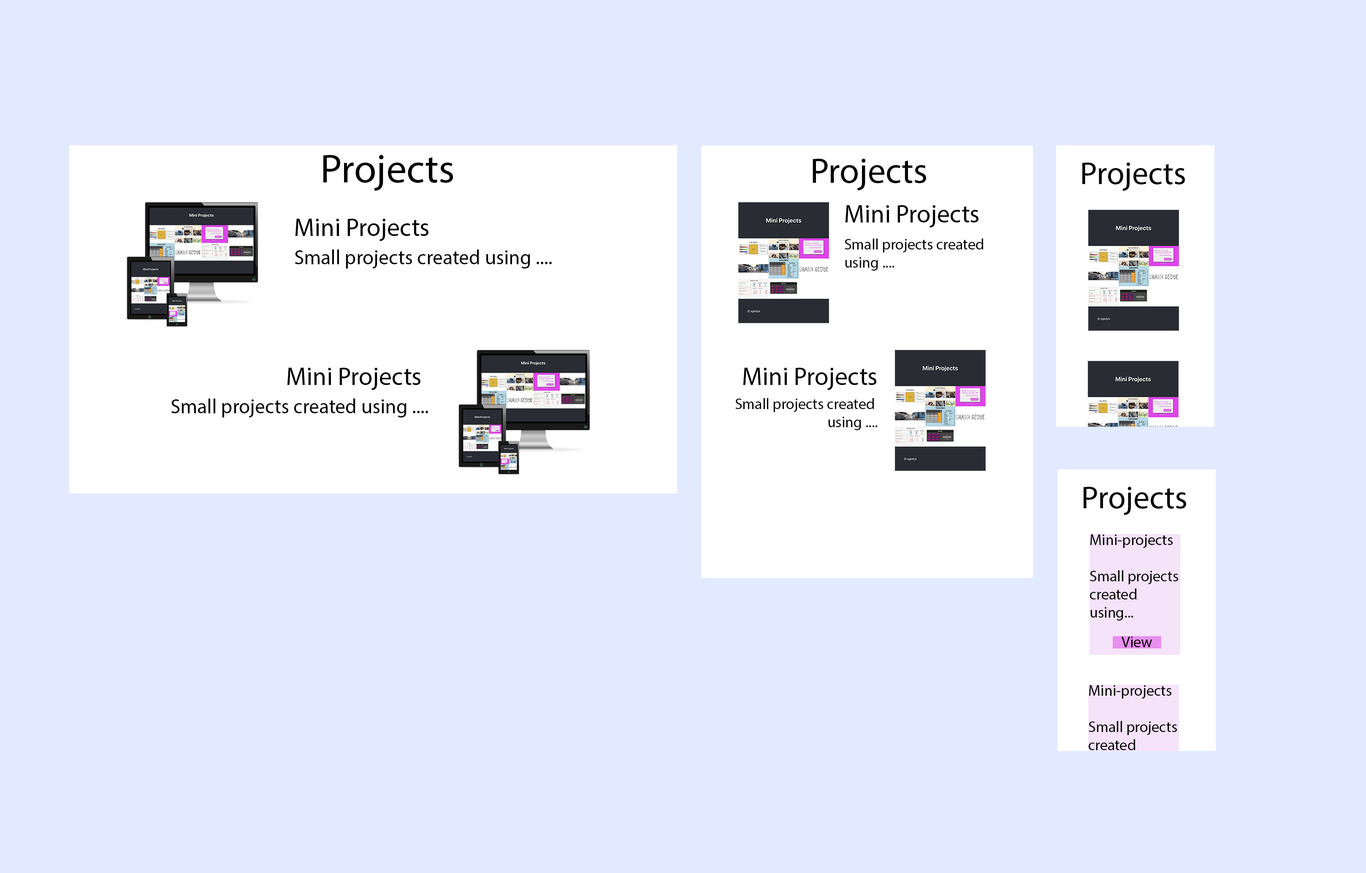
<style>
.page{position:relative;width:1366px;height:873px;background:#e2eaff}
.page>*{position:absolute;margin:0}
.t1{font:40.5px "MyriadPro-Regular";color:#000000}
.t2{font:35.5px "MyriadPro-Regular";color:#000000}
.t3{font:32.1px "MyriadPro-Regular";color:#000000}
.t4{font:25.3px "MyriadPro-Regular";color:#000000}
.t5{font:15.2px "MyriadPro-Regular";color:#000000}
.t6{font:20.3px "MyriadPro-Regular";color:#000000}
</style>
<div class="page">
<p class="t1" style="left:323px;top:155px;width:130px;height:36px">Projects</p>
<p class="t2" style="left:813px;top:159px;width:113px;height:31px">Projects</p>
<p class="t3" style="left:1082px;top:163px;width:103px;height:28px">Projects</p>
<p class="t4" style="left:845px;top:205px;width:133px;height:23px">Mini Projects</p>
<p class="t4" style="left:295px;top:219px;width:133px;height:22px">Mini Projects</p>
<p class="t5" style="left:845px;top:238px;width:138px;height:33px">Small projects created <br>using ....</p>
<p class="t6" style="left:295px;top:249px;width:257px;height:19px">Small projects created using ....</p>
<p class="t4" style="left:287px;top:368px;width:133px;height:22px">Mini Projects</p>
<p class="t4" style="left:743px;top:368px;width:133px;height:22px">Mini Projects</p>
<p class="t6" style="left:171px;top:398px;width:257px;height:19px">Small projects created using ....</p>
<p class="t5" style="left:735px;top:398px;width:143px;height:32px;text-align:right">Small projects created <br>using ....</p>
<p class="t3" style="left:1084px;top:487px;width:102px;height:28px">Projects</p>
<p class="t5" style="left:1090px;top:534px;width:88px;height:87px">Mini-projects<br><br>Small projects created using...</p>
<p class="t5" style="left:1122px;top:637px;width:30px;height:10px">View</p>
<p class="t5" style="left:1089px;top:685px;width:88px;height:86px">Mini-projects<br><br>Small projects created using...</p>
</div>
